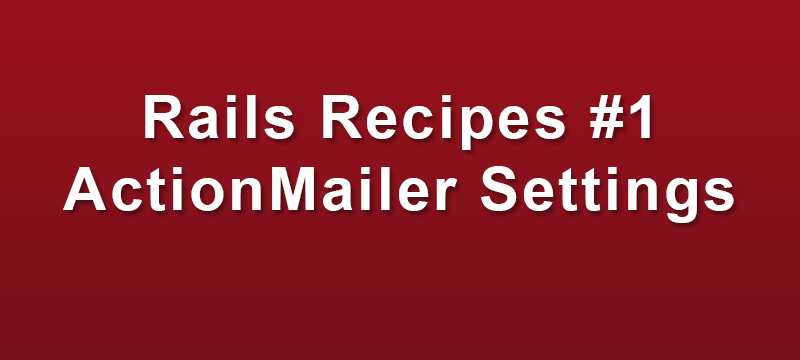
<style>
.page{position:relative;width:800px;height:360px}
.page>*{position:absolute;margin:0}
.t1{font:60px "Arial-BoldMT";letter-spacing:0.05em;color:#ffffff}
</style>
<div class="page">
<p class="t1" style="left:63px;top:95px;width:671px;height:128px;text-align:center">Rails Recipes #1<br>ActionMailer Settings</p>
</div>
